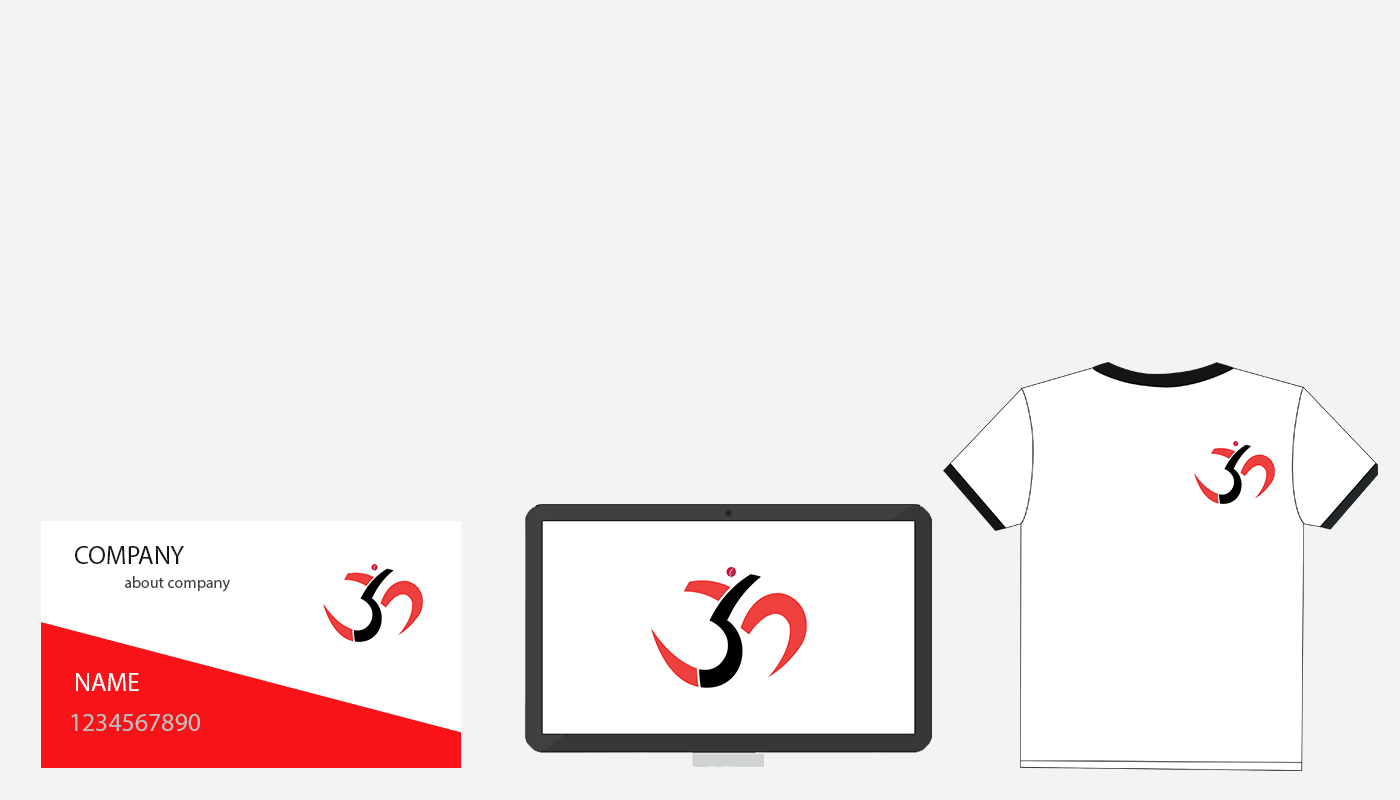
<style>
.page{position:relative;width:1400px;height:800px;background:#f3f3f3}
.page>*{position:absolute;margin:0}
.t1{font:25.7px "MyriadPro-Regular";color:#151515}
.t2{font:16.1px "MyriadPro-Regular";color:#404040}
.t3{font:25.7px "MyriadPro-Regular";color:#ffffff}
.t4{font:25.7px "MyriadPro-Regular";color:#bebebe}
</style>
<div class="page">
<p class="t1" style="left:75px;top:546px;width:109px;height:18px">COMPANY</p>
<p class="t2" style="left:125px;top:576px;width:105px;height:16px">about company</p>
<p class="t3" style="left:76px;top:673px;width:63px;height:18px">NAME</p>
<p class="t4" style="left:71px;top:714px;width:129px;height:17px">1234567890</p>
</div>
